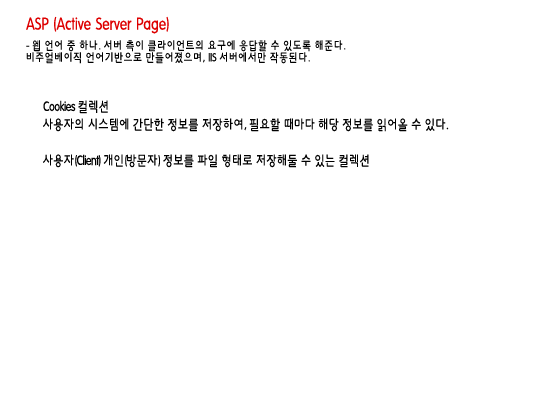
<style>
.page{position:relative;width:550px;height:400px;background:#ffffff}
.page>*{position:absolute;margin:0}
.t1{font:12px/12px "HYkanM";letter-spacing:-0.01em;color:#000000;scale:0.8 1}
.t2{font:18px/24px "HYkanM";letter-spacing:-0.01em;color:#dd0000;scale:0.8 1}
.t3{font:14px/18px "HYkanM";letter-spacing:-0.05em;color:#000000;scale:0.8 1}
</style>
<div class="page">
<p class="t1" style="left:26px;top:16px;width:320px;height:48px"><span class="t2">ASP (Active Server Page)<br></span>- 웹 언어 중 하나. 서버 측이 클라이언트의 요구에 응답할 수 있도록 해준다. <br>비주얼베이직 언어기반으로 만들어졌으며, IIS 서버에서만 작동된다.</p>
<p class="t3" style="left:43px;top:100px;width:406px;height:68px">Cookies 컬렉션<br>사용자의 시스템에 간단한 정보를 저장하여, 필요할 때마다 해당 정보를 읽어올 수 있다.<br><br>사용자(Client) 개인(방문자) 정보를 파일 형태로 저장해둘 수 있는 컬렉션</p>
</div>
